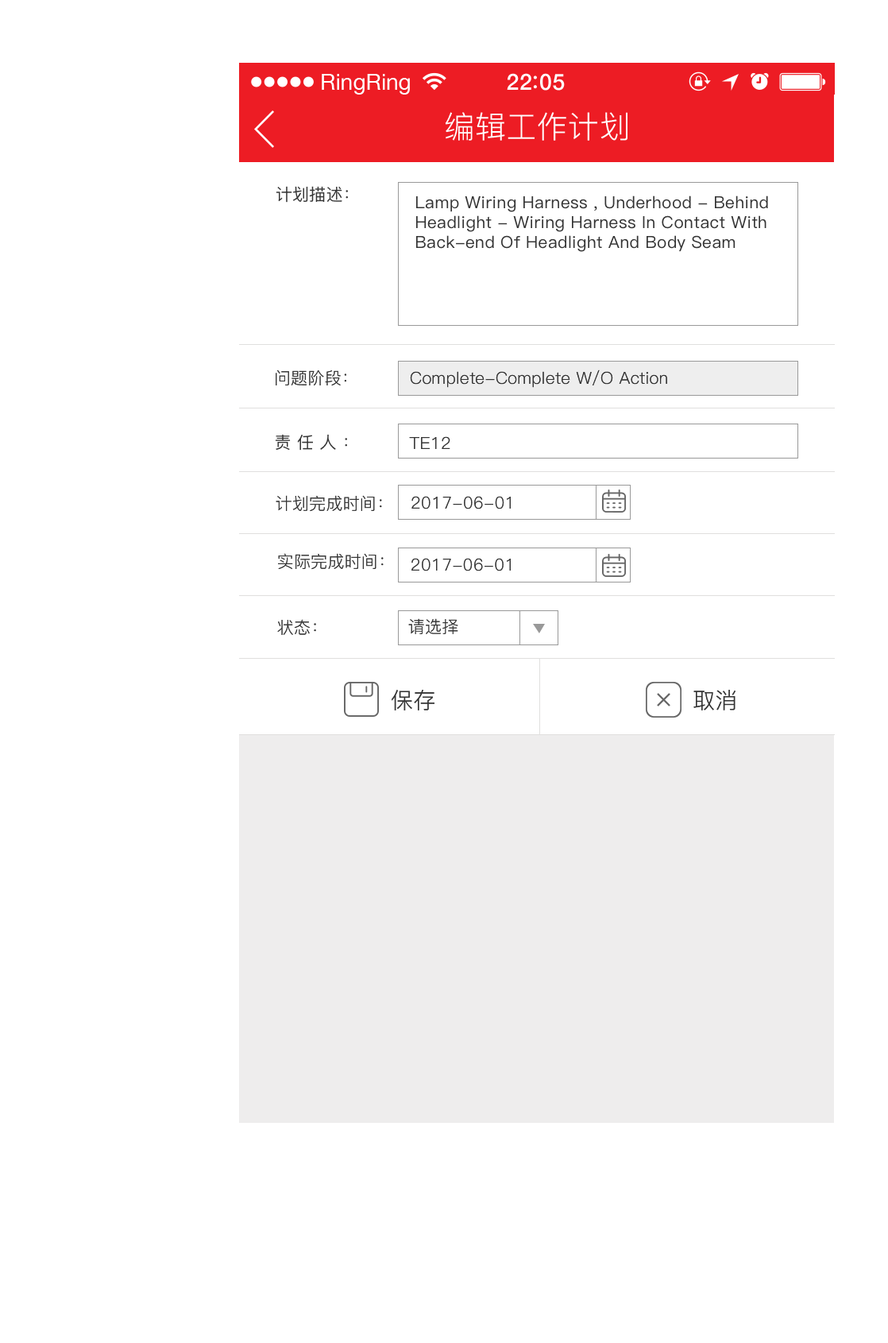
<style>
.page{position:relative;width:888px;height:1343px;background:#ffffff}
.page>*{position:absolute;margin:0}
.t1{font:22.3px "HelveticaNeue";color:#ffffff}
.t2{font:22.3px "HelveticaNeue-Medium";letter-spacing:0.03em;color:#ffffff}
.t3{font:30.7px "PingFang-SC-Regular";letter-spacing:0.01em;color:#ffffff}
.t4{font:16.7px "PingFangSC-Regular";letter-spacing:0.01em;color:#333333}
.t5{font:16.7px "PingFang-SC-Regular";letter-spacing:0.01em;color:#333333}
.t6{font:16.7px "PingFangSC-Regular";letter-spacing:0.35em;color:#333333}
.t7{font:22.2px "PingFang-SC-Regular";letter-spacing:0.01em;color:#333333}
</style>
<div class="page">
<p class="t1" style="left:322px;top:74px;width:88px;height:21px">RingRing</p>
<p class="t2" style="left:507px;top:73px;width:58px;height:18px">22 05</p>
<p class="t3" style="left:445px;top:112px;width:183px;height:29px">编辑工作计划</p>
<p class="t4" style="left:276px;top:186px;width:72px;height:17px">计划描述：</p>
<p class="t4" style="left:416px;top:195px;width:352px;height:57px">Lamp Wiring Harness , Underhood - Behind Headlight - Wiring Harness In Contact With Back-end Of Headlight And Body Seam</p>
<p class="t5" style="left:276px;top:369px;width:70px;height:16px">问题阶段：</p>
<p class="t5" style="left:410px;top:369px;width:257px;height:19px">Complete-Complete W/O Action</p>
<p class="t6" style="left:275px;top:434px;width:72px;height:16px">责任人：</p>
<p class="t5" style="left:409px;top:436px;width:41px;height:13px">TE12</p>
<p class="t5" style="left:276px;top:495px;width:106px;height:17px">计划完成时间：</p>
<p class="t5" style="left:412px;top:496px;width:99px;height:13px">2017-06-01</p>
<p class="t5" style="left:278px;top:553px;width:106px;height:17px">实际完成时间：</p>
<p class="t5" style="left:412px;top:558px;width:99px;height:13px">2017-06-01</p>
<p class="t5" style="left:277px;top:619px;width:39px;height:16px">状态：</p>
<p class="t5" style="left:408px;top:618px;width:50px;height:16px">请选择</p>
<p class="t7" style="left:392px;top:690px;width:43px;height:20px">保存</p>
<p class="t7" style="left:694px;top:690px;width:42px;height:20px">取消</p>
</div>
